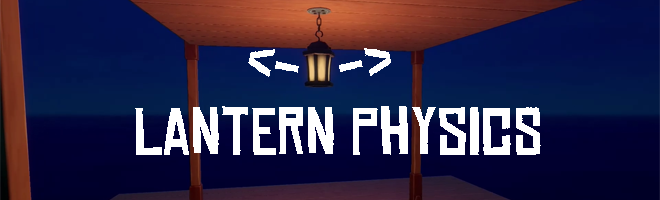
<style>
.page{position:relative;width:660px;height:200px}
.page>*{position:absolute;margin:0}
.t1{font:64px "ChineseRocksRg-Regular";color:#ffffff}
</style>
<div class="page">
<p class="t1" style="left:248px;top:49px;width:51px;height:28px;rotate:12deg">&lt;-</p>
<p class="t1" style="left:339px;top:48px;width:52px;height:28px;rotate:-12deg">-&gt;</p>
<p class="t1" style="left:135px;top:106px;width:406px;height:49px">Lantern Physics</p>
</div>
